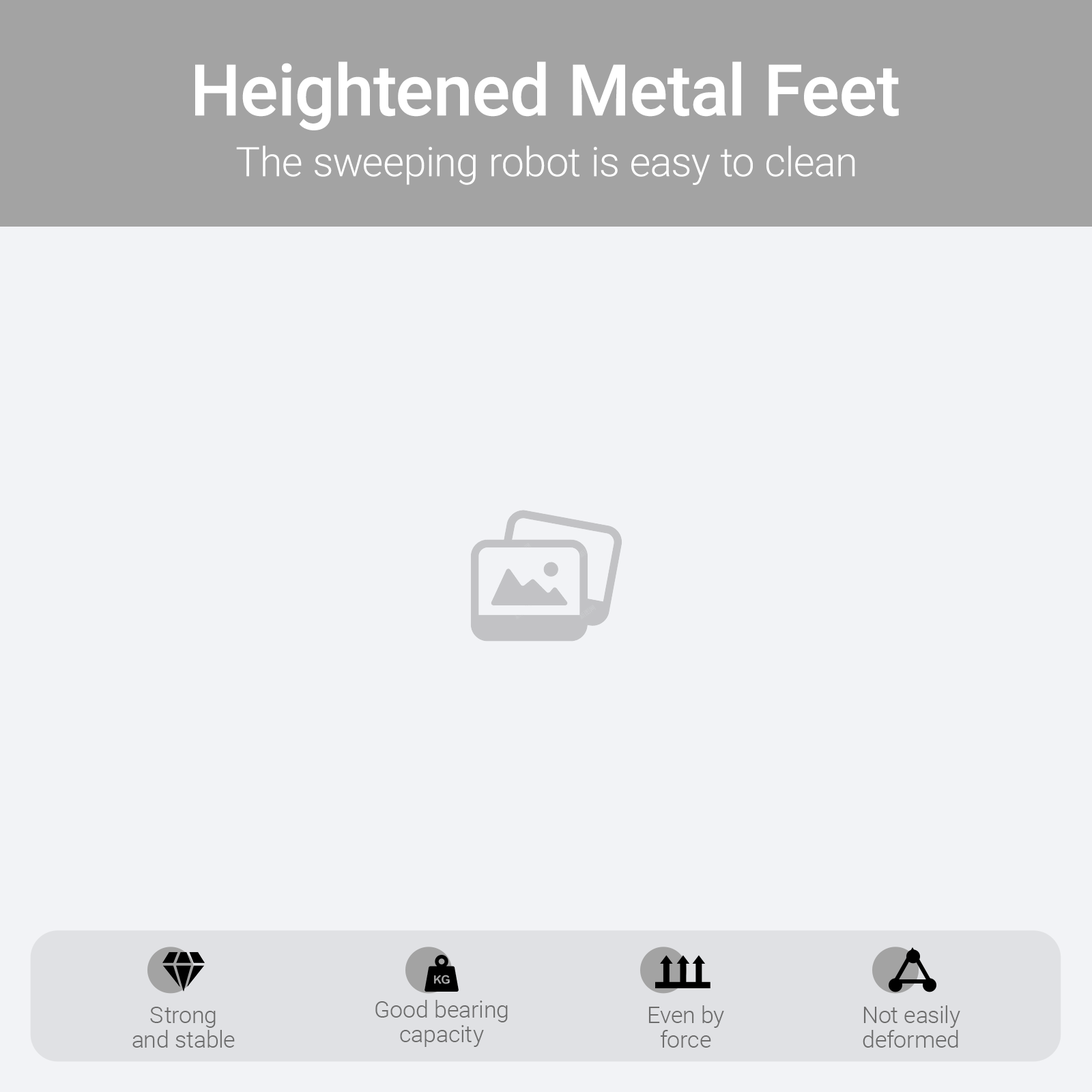
<style>
.page{position:relative;width:1092px;height:1092px;background:#f2f3f6}
.page>*{position:absolute;margin:0}
.t1{font:71.3px "Roboto-Medium";color:#ffffff}
.t2{font:40.8px "Roboto-Light";color:#ffffff}
.t3{font:23.3px/24.6px "Roboto-Light";color:#6c6c6c}
</style>
<div class="page">
<p class="t1" style="left:195px;top:61px;width:704px;height:69px">Heightened Metal Feet</p>
<p class="t2" style="left:236px;top:145px;width:619px;height:40px">The sweeping robot is easy to clean</p>
<p class="t3" style="left:375px;top:1000px;width:133px;height:47px;text-align:center">Good bearing<br>capacity</p>
<p class="t3" style="left:132px;top:1007px;width:103px;height:41px;text-align:center">Strong<br>and stable</p>
<p class="t3" style="left:648px;top:1005px;width:76px;height:43px;text-align:center">Even by<br>force</p>
<p class="t3" style="left:863px;top:1005px;width:97px;height:43px;text-align:center">Not easily<br>deformed</p>
</div>
